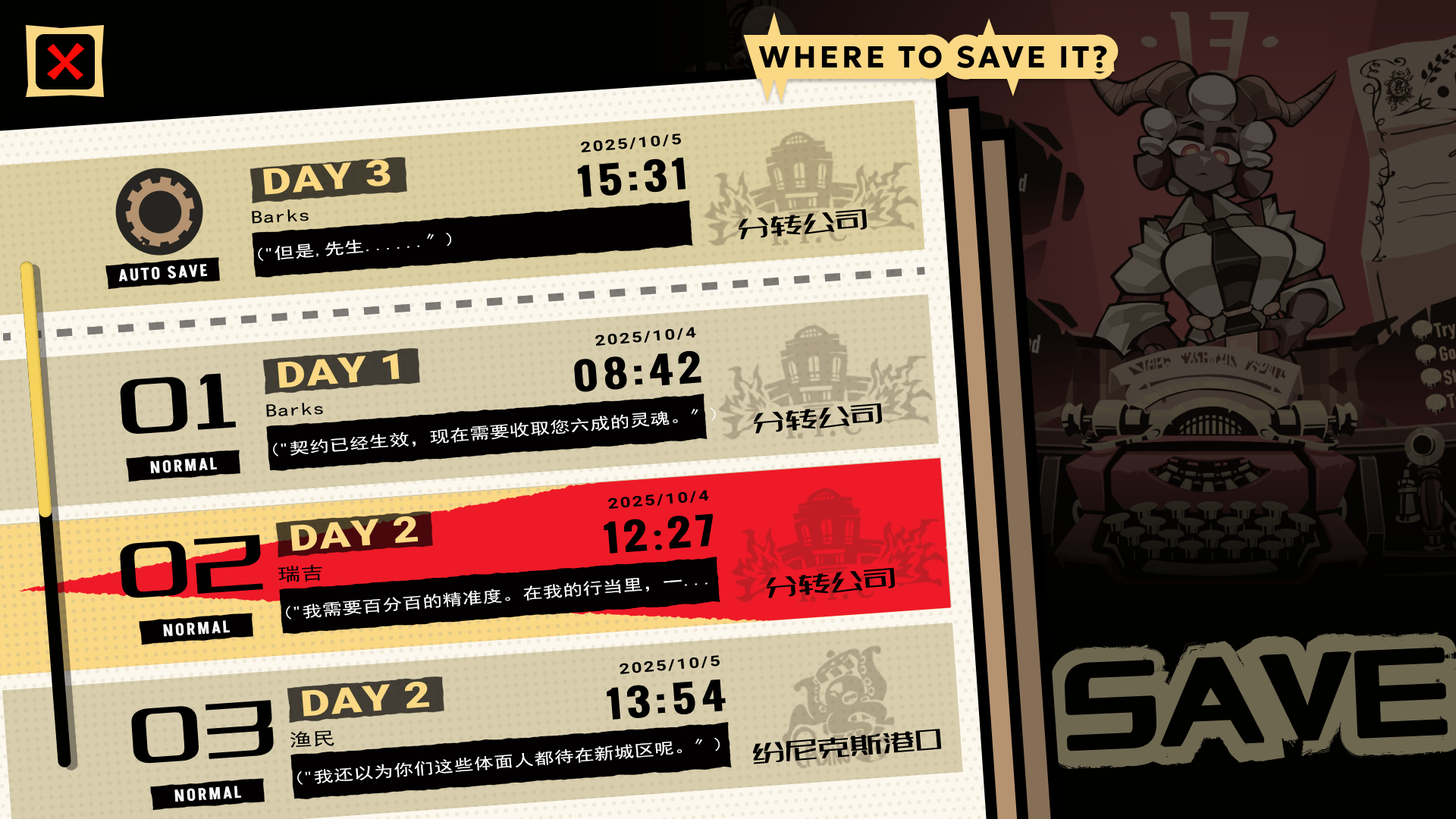
<style>
.page{position:relative;width:1456px;height:819px}
.page>*{position:absolute;margin:0}
.t1{font:14.4px "Roboto-Bold";letter-spacing:0.1em;color:#000000;scale:1.27 1}
.t2{font:35.9px "Roboto-Black";letter-spacing:0.02em;color:#fbd884;scale:1.27 1}
.t3{font:35.9px "Oswald-Bold";letter-spacing:0.1em;color:#000000;scale:1.27 1}
.t4{font:18px "SimHei";letter-spacing:0.02em;color:#000000;scale:1.27 1}
.t5{font:28.8px "007-SSJingDongTi";letter-spacing:0.02em;color:#000000;scale:1.27 1}
.t6{font:15.6px "SimHei";letter-spacing:0.02em;color:#ffffff;scale:1.27 1}
.t7{font:101.8px "007-SSJingDongTi";letter-spacing:0.02em;color:#000000;scale:1.27 1}
.t8{font:35.9px "AdobeHeitiStd-Regular";letter-spacing:0.1em;color:#000000;scale:1.27 1}
</style>
<div class="page">
<p class="t1" style="left:581px;top:133px;width:100px;height:19px;rotate:-5deg">2025/10/5</p>
<p class="t2" style="left:263px;top:160px;width:128px;height:35px;rotate:-4deg">DAY 3</p>
<p class="t3" style="left:577px;top:157px;width:109px;height:40px;rotate:-4deg">15:31</p>
<p class="t4" style="left:252px;top:209px;width:57px;height:15px;rotate:-3deg">Barks</p>
<p class="t5" style="left:738px;top:209px;width:130px;height:31px;rotate:-5deg">分转公司</p>
<p class="t6" style="left:258px;top:233px;width:193px;height:28px;rotate:-5deg">("但是,先生......〞)</p>
<p class="t1" style="left:595px;top:327px;width:101px;height:19px;rotate:-5deg">2025/10/4</p>
<p class="t2" style="left:278px;top:353px;width:122px;height:35px;rotate:-4deg">DAY 1</p>
<p class="t3" style="left:574px;top:350px;width:127px;height:42px;rotate:-4deg">08:42</p>
<p class="t7" style="left:120px;top:373px;width:116px;height:61px;rotate:-4deg">01</p>
<p class="t4" style="left:266px;top:403px;width:57px;height:14px;rotate:-3deg">Barks</p>
<p class="t6" style="left:273px;top:407px;width:443px;height:50px;rotate:-5deg">("契约已经生效，现在需要收取您六成的灵魂。〞)</p>
<p class="t5" style="left:753px;top:403px;width:130px;height:31px;rotate:-5deg">分转公司</p>
<p class="t1" style="left:608px;top:490px;width:101px;height:19px;rotate:-5deg">2025/10/4</p>
<p class="t2" style="left:290px;top:516px;width:129px;height:35px;rotate:-4deg">DAY 2</p>
<p class="t3" style="left:604px;top:513px;width:109px;height:41px;rotate:-4deg">12<span class="t8">:</span>27</p>
<p class="t7" style="left:120px;top:535px;width:143px;height:63px;rotate:-4deg">02</p>
<p class="t4" style="left:278px;top:564px;width:44px;height:18px;rotate:-3deg">瑞吉</p>
<p class="t5" style="left:766px;top:567px;width:130px;height:31px;rotate:-5deg">分转公司</p>
<p class="t6" style="left:286px;top:578px;width:422px;height:42px;rotate:-5deg">("我需要百分百的精准度。在我的行当里，一...〞)</p>
<p class="t1" style="left:620px;top:655px;width:100px;height:19px;rotate:-5deg">2025/10/5</p>
<p class="t2" style="left:302px;top:681px;width:128px;height:36px;rotate:-4deg">DAY 2</p>
<p class="t3" style="left:607px;top:679px;width:119px;height:41px;rotate:-4deg">13:54</p>
<p class="t7" style="left:131px;top:700px;width:143px;height:64px;rotate:-4deg">03</p>
<p class="t4" style="left:290px;top:730px;width:44px;height:18px;rotate:-3deg">渔民</p>
<p class="t6" style="left:297px;top:738px;width:423px;height:47px;rotate:-5deg">("我还以为你们这些体面人都待在新城区呢。〞)</p>
<p class="t5" style="left:753px;top:729px;width:189px;height:35px;rotate:-5deg">纷尼克斯港口</p>
</div>
